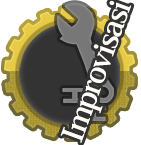
<style>
.page{position:relative;width:141px;height:145px;background:#ffffff}
.page>*{position:absolute;margin:0}
.t1{font:31px "HeiseiMinStd-W7";letter-spacing:-0.04em;color:#fffef9}
</style>
<div class="page">
<p class="t1" style="left:60px;top:0px;width:72px;height:143px;rotate:-70deg">Improvisasi</p>
</div>
